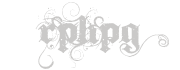
<style>
.page{position:relative;width:180px;height:70px;background:#ffffff}
.page>*{position:absolute;margin:0}
.t1{font:60px "Ithornt";color:#cac9c8}
</style>
<div class="page">
<p class="t1" style="left:35px;top:2px;width:134px;height:67px">RPHPG</p>
</div>
